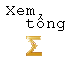
<style>
.page{position:relative;width:71px;height:58px;background:#ffffff}
.page>*{position:absolute;margin:0}
.t1{font:12px/13.3px "CourierNewPSMT";color:#000000}
</style>
<div class="page">
<p class="t1" style="left:6px;top:6px;width:59px;height:25px">Xem<br>  tổng</p>
</div>
